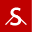
<style>
.page{position:relative;width:32px;height:32px;background:#c00000}
.page>*{position:absolute;margin:0}
.t1{font:36px "MyriadPro-Regular";letter-spacing:0.005em;color:#ffffff}
</style>
<div class="page">
<p class="t1" style="left:10px;top:7px;width:12px;height:19px">s</p>
</div>
